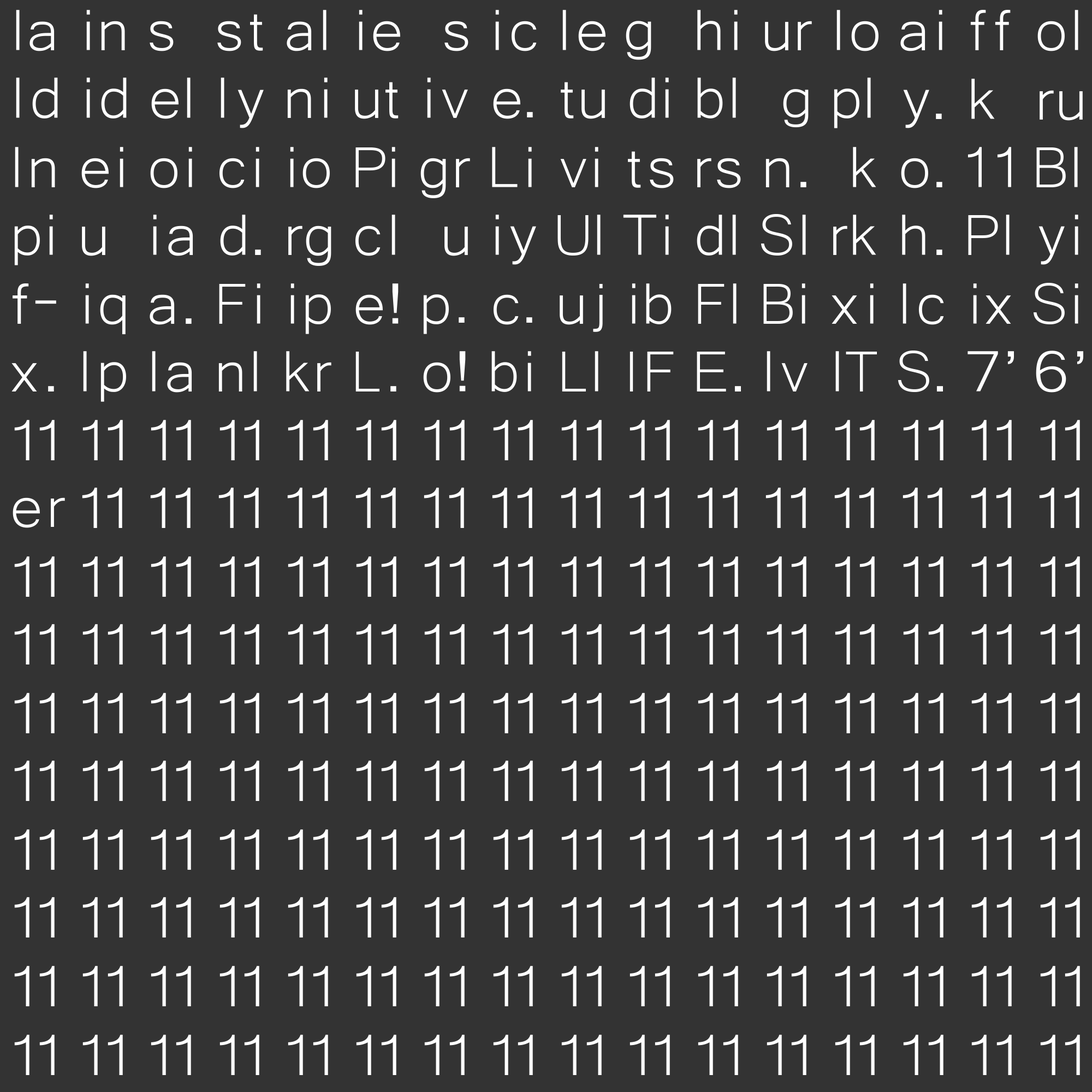
<style>
.page{position:relative;width:1092px;height:1092px;background:#333333}
.page>*{position:absolute;margin:0}
.t1{font:74.6px "Microsoft-Yi-Baiti";color:#ffffff;scale:1.07 1}
.t2{font:74.6px "Microsoft-Yi-Baiti";letter-spacing:0.02em;color:#ffffff;scale:1.07 1}
.t3{font:73.6px "Microsoft-Yi-Baiti";color:#ffffff;scale:1.08 1}
.t4{font:74.6px "Microsoft-Yi-Baiti";letter-spacing:0.04em;color:#ffffff;scale:1.07 1}
.t5{font:74.6px "Microsoft-Yi-Baiti";letter-spacing:-0.12em;color:#ffffff;scale:1.07 1}
.t6{font:73.6px "Microsoft-Yi-Baiti";letter-spacing:0.02em;color:#ffffff;scale:1.08 1}
.t7{font:74.6px "Microsoft-Yi-Baiti";letter-spacing:-0.1em;color:#ffffff;scale:1.07 1}
.t8{font:74.6px "Microsoft-Yi-Baiti";letter-spacing:0.06em;color:#ffffff;scale:1.07 1}
.t9{font:72.6px "Microsoft-Yi-Baiti";color:#ffffff;scale:1.1 1}
.t10{font:73.6px "Microsoft-Yi-Baiti";letter-spacing:0.04em;color:#ffffff;scale:1.08 1}
.t11{font:74.6px "Microsoft-Yi-Baiti";letter-spacing:0.1em;color:#ffffff;scale:1.07 1}
.t12{font:74.6px "Microsoft-Yi-Baiti";letter-spacing:0.025em;color:#ffffff;scale:1.07 1}
.t13{font:74.6px "Microsoft-Yi-Baiti";letter-spacing:0.08em;color:#ffffff;scale:1.07 1}
.t14{font:74.6px "Microsoft-Yi-Baiti";letter-spacing:-0.08em;color:#ffffff;scale:1.07 1}
.t15{font:74.6px "Microsoft-Yi-Baiti";letter-spacing:-0.04em;color:#ffffff;scale:1.07 1}
.t16{font:74.6px "Microsoft-Yi-Baiti";letter-spacing:-0.06em;color:#ffffff;scale:1.07 1}
.t17{font:74.6px "Microsoft-Yi-Baiti";letter-spacing:-0.13em;color:#ffffff;scale:1.07 1}
.t18{font:71.6px "Microsoft-Yi-Baiti";color:#ffffff;scale:1.11 1}
.t19{font:72.6px "Microsoft-Yi-Baiti";letter-spacing:-0.02em;color:#ffffff;scale:1.1 1}
.t20{font:74.6px "Microsoft-Yi-Baiti";letter-spacing:-0.02em;color:#ffffff}
.t21{font:74.6px "Microsoft-Yi-Baiti";letter-spacing:0.035em;color:#ffffff;scale:1.07 1}
.t22{font:74.6px "Microsoft-Yi-Baiti";letter-spacing:-0.02em;color:#ffffff;scale:1.07 1}
.t23{font:74.6px "Microsoft-Yi-Baiti";letter-spacing:-0.185em;color:#ffffff;scale:1.07 1}
.t24{font:74.6px "Microsoft-Yi-Baiti";letter-spacing:-0.14em;color:#ffffff;scale:1.07 1}
.t25{font:74.6px "Microsoft-Yi-Baiti";letter-spacing:-0.16em;color:#ffffff;scale:1.07 1}
.t26{font:74.6px "Microsoft-Yi-Baiti";color:#ffffff}
.t27{font:72.6px "Microsoft-Yi-Baiti";letter-spacing:0.02em;color:#ffffff;scale:1.1 1}
.t28{font:74.6px "Microsoft-Yi-Baiti";letter-spacing:0.02em;color:#ffffff}
.t29{font:72.6px "Microsoft-Yi-Baiti";letter-spacing:0.04em;color:#ffffff;scale:1.1 1}
.t30{font:74.6px "Microsoft-Yi-Baiti";letter-spacing:0.02em;color:#ffffff;scale:1.13 1}
.t31{font:75.5px "Microsoft-Yi-Baiti";color:#ffffff;scale:0.93 1}
.t32{font:74.6px "Microsoft-Yi-Baiti";letter-spacing:0.04em;color:#ffffff}
.t33{font:70.6px "Microsoft-Yi-Baiti";color:#ffffff;scale:1.13 1}
.t34{font:74.6px "Microsoft-Yi-Baiti";letter-spacing:0.005em;color:#ffffff;scale:1.07 1}
.t35{font:74.6px "Microsoft-Yi-Baiti";letter-spacing:0.04em;color:#ffffff;scale:1.13 1}
.t36{font:74.6px "Microsoft-Yi-Baiti";letter-spacing:-0.14em;color:#ffffff}
.t37{font:74.6px "Microsoft-Yi-Baiti";letter-spacing:-0.04em;color:#ffffff}
.t38{font:74.6px "Microsoft-Yi-Baiti";letter-spacing:-0.06em;color:#ffffff;scale:1.2 1}
.t39{font:74.6px "Microsoft-Yi-Baiti";letter-spacing:-0.17em;color:#ffffff;scale:1.13 1}
.t40{font:74.6px "Microsoft-Yi-Baiti";letter-spacing:-0.04em;color:#ffffff;scale:1.2 1}
.t41{font:75.5px "Microsoft-Yi-Baiti";letter-spacing:-0.222em;color:#ffffff;scale:1.13 1}
</style>
<div class="page">
<p class="t1" style="left:16px;top:10px;width:1062px;height:50px"><span class="t2">l</span><span class="t3">a </span><span class="t2">i</span>n s<span class="t4"> s</span><span class="t5">t </span><span class="t6">a</span><span class="t7">l </span><span class="t4">i</span>e s <span class="t8">i</span>c <span class="t8">l</span>e <span class="t9">g </span><span class="t4">h</span>i ur <span class="t4">l</span>o <span class="t10">a</span>i <span class="t11">f</span>f <span class="t12">o</span>l</p>
<p class="t1" style="left:16px;top:78px;width:1067px;height:50px"><span class="t8">l</span><span class="t7">d </span><span class="t4">i</span>d el <span class="t13">l</span><span class="t9">y </span><span class="t4">n</span>i u<span class="t14">t </span><span class="t8">i</span><span class="t7">v </span><span class="t15">e</span><span class="t16">. </span><span class="t2">t</span><span class="t17">u </span>d<span class="t7">i </span><span class="t2">b</span>l <span class="t18">g </span>p<span class="t7">l </span><span class="t19">y</span>. k ru</p>
<p class="t1" style="left:15px;top:147px;width:1063px;height:51px"><span class="t4">l</span><span class="t5">n </span><span class="t4">e</span><span class="t5">i </span><span class="t4">o</span>i <span class="t8">c</span>i <span class="t2">i</span>o <span class="t20">P</span>i gr <span class="t21">Li </span><span class="t2">v</span><span class="t7">i </span><span class="t8">t</span><span class="t22">s </span><span class="t2">r</span>s n. <span class="t14">k </span><span class="t22">o</span><span class="t23">. </span><span class="t24">1</span><span class="t25">1 </span><span class="t26">B</span>l</p>
<p class="t2" style="left:14px;top:214px;width:1064px;height:52px">pi <span class="t1">u</span><span class="t4"> i</span>a <span class="t22">d</span>. <span class="t1">r</span>g <span class="t8">c</span>l u <span class="t8">i</span><span class="t27">y </span><span class="t20">U</span>l Ti <span class="t1">d</span>l <span class="t28">S</span><span class="t5">l </span><span class="t1">r</span>k <span class="t1">h</span>. <span class="t26">P</span>l <span class="t29">y</span>i</p>
<p class="t1" style="left:13px;top:283px;width:1065px;height:52px"><span class="t30">f</span><span class="t31">- </span><span class="t4">i</span>q a. <span class="t32">F</span>i <span class="t2">i</span>p <span class="t15">e</span>! p<span class="t15">. </span>c. <span class="t13">u</span><span class="t33">j </span><span class="t34">i</span>b <span class="t26">F</span>l <span class="t26">B</span>i <span class="t13">x</span>i <span class="t8">l</span>c <span class="t2">i</span>x <span class="t28">S</span>i</p>
<p class="t2" style="left:11px;top:351px;width:1072px;height:51px"><span class="t4">x</span>. <span class="t8">l</span>p <span class="t4">l</span>a nl kr <span class="t28">L</span>. <span class="t15">o</span>! <span class="t4">b</span>i <span class="t28">L</span>l <span class="t32">I</span><span class="t28">F </span><span class="t20">E</span><span class="t35">. </span><span class="t8">l</span>v <span class="t22">I</span><span class="t36">T </span><span class="t37">S</span><span class="t35">. </span><span class="t38">7</span><span class="t39">’ </span><span class="t40">6</span><span class="t35">’</span></p>
<p class="t41" style="left:14px;top:420px;width:1066px;height:40px">11 11 11 11 11 11 11 11 11 11 11 11 11 11 11 11</p>
<p class="t4" style="left:13px;top:497px;width:52px;height:31px">e<span class="t2">r</span></p>
<p class="t41" style="left:14px;top:556px;width:1066px;height:41px">11 11 11 11 11 11 11 11 11 11 11 11 11 11 11 11</p>
<p class="t41" style="left:14px;top:624px;width:1066px;height:40px">11 11 11 11 11 11 11 11 11 11 11 11 11 11 11 11</p>
<p class="t41" style="left:14px;top:693px;width:1066px;height:40px">11 11 11 11 11 11 11 11 11 11 11 11 11 11 11 11</p>
<p class="t41" style="left:14px;top:761px;width:1066px;height:40px">11 11 11 11 11 11 11 11 11 11 11 11 11 11 11 11</p>
<p class="t41" style="left:14px;top:829px;width:1066px;height:41px">11 11 11 11 11 11 11 11 11 11 11 11 11 11 11 11</p>
<p class="t41" style="left:14px;top:897px;width:1066px;height:40px">11 11 11 11 11 11 11 11 11 11 11 11 11 11 11 11</p>
<p class="t41" style="left:14px;top:966px;width:1066px;height:40px">11 11 11 11 11 11 11 11 11 11 11 11 11 11 11 11</p>
<p class="t41" style="left:14px;top:1035px;width:1066px;height:40px">11 11 11 11 11 11 11 11 11 11 11 11 11 11 11 11</p>
</div>
